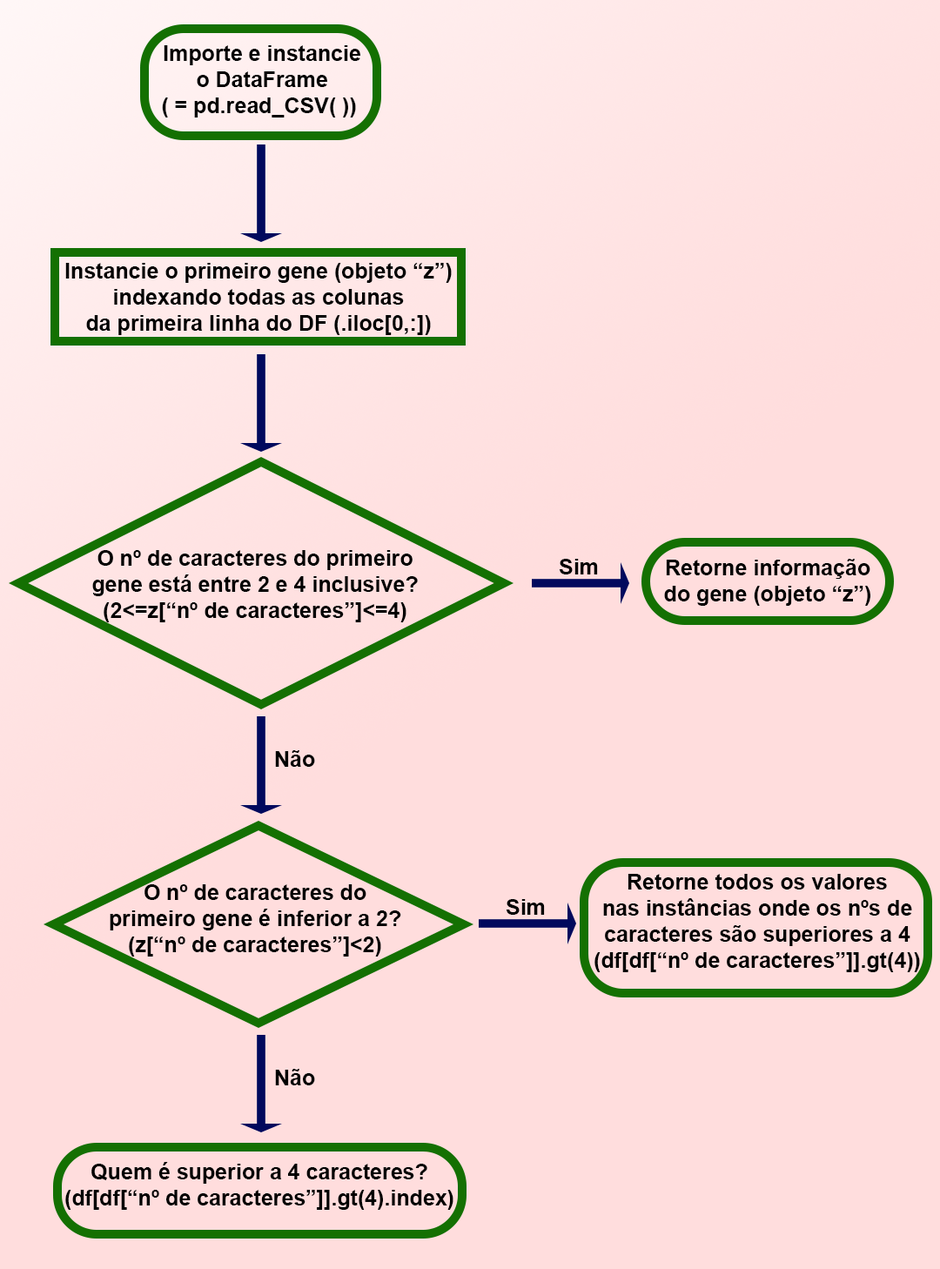
<style>
.page{position:relative;width:940px;height:1269px;background:#ffdddd}
.page>*{position:absolute;margin:0}
.t1{font:21.8px "Arial-BoldMT";color:#000000}
</style>
<div class="page">
<p class="t1" style="left:162px;top:45px;width:198px;height:72px;text-align:center">Importe e instancie<br>o DataFrame<br>( = pd.read_CSV( ))</p>
<p class="t1" style="left:65px;top:263px;width:387px;height:72px;text-align:center">Instancie o primeiro gene (objeto “z”)<br>indexando todas as colunas<br>da primeira linha do DF (.iloc[0,:])</p>
<p class="t1" style="left:92px;top:550px;width:326px;height:72px;text-align:center">O nº de caracteres do primeiro<br>gene está entre 2 e 4 inclusive?<br>(2&lt;=z[“nº de caracteres”]&lt;=4)</p>
<p class="t1" style="left:559px;top:559px;width:39px;height:15px">Sim</p>
<p class="t1" style="left:664px;top:559px;width:206px;height:47px;text-align:center">Retorne informação<br>do gene (objeto “z”)</p>
<p class="t1" style="left:275px;top:750px;width:40px;height:17px">Não</p>
<p class="t1" style="left:594px;top:874px;width:326px;height:98px;text-align:center">Retorne todos os valores<br>nas instâncias onde os nºs de<br>caracteres são superiores a 4<br>(df[df[“nº de caracteres”]].gt(4))</p>
<p class="t1" style="left:110px;top:884px;width:291px;height:72px;text-align:center">O nº de caracteres do<br>primeiro gene é inferior a 2?<br>(z[“nº de caracteres”]&lt;2)</p>
<p class="t1" style="left:506px;top:899px;width:39px;height:16px">Sim</p>
<p class="t1" style="left:275px;top:1069px;width:40px;height:16px">Não</p>
<p class="t1" style="left:65px;top:1162px;width:388px;height:48px;text-align:center">Quem é superior a 4 caracteres?<br>(df[df[“nº de caracteres”]].gt(4).index)</p>
</div>
